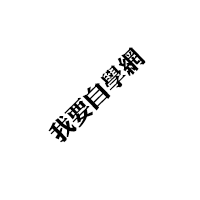
<style>
.page{position:relative;width:200px;height:200px;background:#ffffff}
.page>*{position:absolute;margin:0}
.t1{font:24px "¾­µä·±·ÂºÚ Regular";color:#000000}
</style>
<div class="page">
<p class="t1" style="left:48px;top:47px;width:98px;height:96px;rotate:-45deg">我要自学网</p>
</div>
